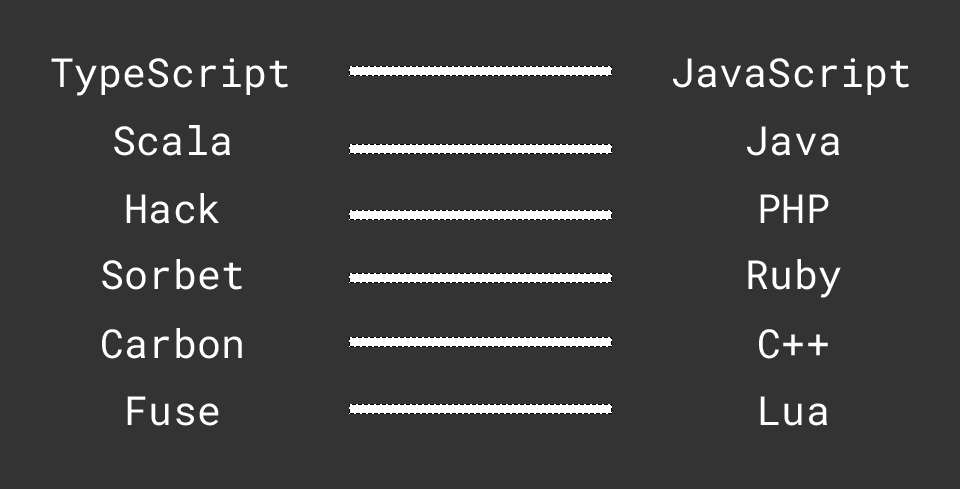
<style>
.page{position:relative;width:960px;height:489px;background:#333333}
.page>*{position:absolute;margin:0}
.t1{font:40px "RobotoMonoNFM-Rg";color:#ffffff}
</style>
<div class="page">
<p class="t1" style="left:51px;top:58px;width:237px;height:38px">TypeScript</p>
<p class="t1" style="left:673px;top:58px;width:236px;height:37px">JavaScript</p>
<p class="t1" style="left:114px;top:125px;width:116px;height:31px">Scala</p>
<p class="t1" style="left:747px;top:126px;width:92px;height:30px">Java</p>
<p class="t1" style="left:126px;top:193px;width:93px;height:31px">Hack</p>
<p class="t1" style="left:760px;top:194px;width:69px;height:29px">PHP</p>
<p class="t1" style="left:102px;top:259px;width:140px;height:31px">Sorbet</p>
<p class="t1" style="left:748px;top:259px;width:93px;height:39px">Ruby</p>
<p class="t1" style="left:102px;top:328px;width:140px;height:31px">Carbon</p>
<p class="t1" style="left:759px;top:329px;width:69px;height:30px">C++</p>
<p class="t1" style="left:127px;top:396px;width:92px;height:30px">Fuse</p>
<p class="t1" style="left:760px;top:396px;width:67px;height:30px">Lua</p>
</div>
